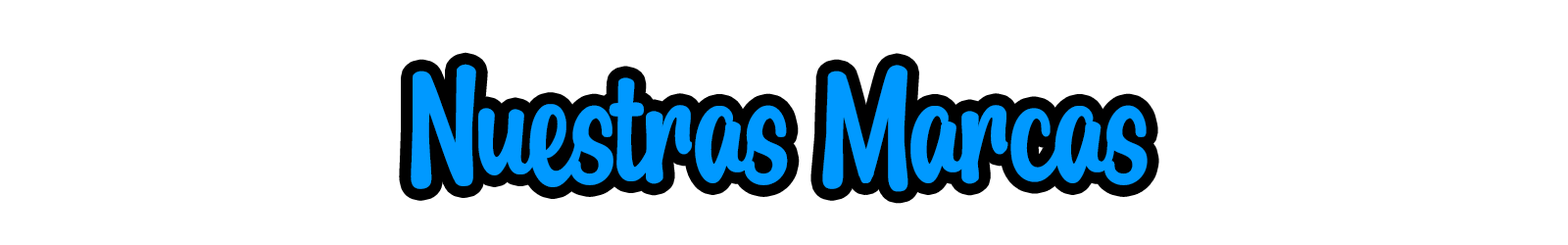
<style>
.page{position:relative;width:1568px;height:245px;background:#ffffff}
.page>*{position:absolute;margin:0}
.t1{font:170.9px "MangoDrink-Regular";color:#0099ff}
</style>
<div class="page">
<p class="t1" style="left:411px;top:64px;width:737px;height:128px">Nuestras Marcas</p>
</div>
